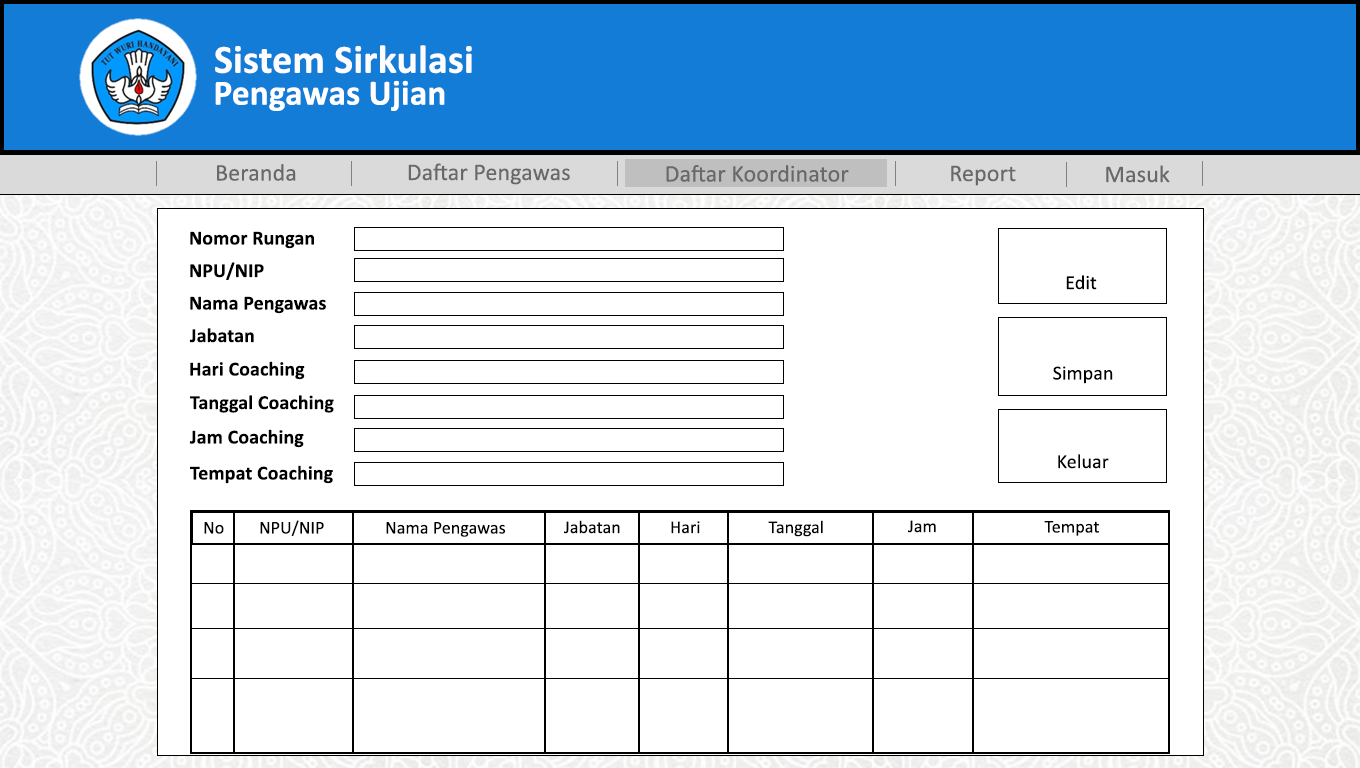
<style>
.page{position:relative;width:1360px;height:768px;background:#ffffff}
.page>*{position:absolute;margin:0}
.t1{font:40.1px "Calibri-Bold";letter-spacing:0.005em;color:#fdfdfd}
.t2{font:35.6px "Calibri-Bold";letter-spacing:0.005em;color:#fffefe}
.t3{font:24px "Calibri";letter-spacing:0.005em;color:#6a6969}
.t4{font:20px "Calibri-Bold";letter-spacing:0.005em;color:#000000}
.t5{font:20px "Calibri";letter-spacing:0.005em;color:#000000}
.t6{font:18px "Calibri";letter-spacing:0.005em;color:#000000}
</style>
<div class="page">
<p class="t1" style="left:215px;top:45px;width:257px;height:29px">Sistem Sirkulasi</p>
<p class="t2" style="left:215px;top:80px;width:230px;height:31px">Pengawas Ujian</p>
<p class="t3" style="left:217px;top:164px;width:79px;height:17px">Beranda</p>
<p class="t3" style="left:408px;top:163px;width:162px;height:22px">Daftar Pengawas</p>
<p class="t3" style="left:666px;top:165px;width:183px;height:17px">Daftar Koordinator</p>
<p class="t3" style="left:951px;top:165px;width:65px;height:21px">Report</p>
<p class="t3" style="left:1106px;top:165px;width:64px;height:18px">Masuk</p>
<p class="t4" style="left:190px;top:231px;width:124px;height:18px">Nomor Rungan</p>
<p class="t4" style="left:190px;top:262px;width:74px;height:18px">NPU/NIP</p>
<p class="t5" style="left:1066px;top:275px;width:31px;height:15px">Edit</p>
<p class="t4" style="left:190px;top:296px;width:136px;height:18px">Nama Pengawas</p>
<p class="t4" style="left:189px;top:328px;width:65px;height:15px">Jabatan</p>
<p class="t4" style="left:190px;top:361px;width:115px;height:19px">Hari Coaching</p>
<p class="t5" style="left:1053px;top:366px;width:60px;height:18px">Simpan</p>
<p class="t4" style="left:190px;top:395px;width:144px;height:18px">Tanggal Coaching</p>
<p class="t4" style="left:189px;top:429px;width:115px;height:19px">Jam Coaching</p>
<p class="t5" style="left:1058px;top:454px;width:51px;height:15px">Keluar</p>
<p class="t4" style="left:190px;top:465px;width:143px;height:19px">Tempat Coaching</p>
<p class="t6" style="left:260px;top:520px;width:64px;height:16px">NPU/NIP</p>
<p class="t6" style="left:564px;top:520px;width:56px;height:14px">Jabatan</p>
<p class="t6" style="left:671px;top:521px;width:29px;height:13px">Hari</p>
<p class="t6" style="left:768px;top:520px;width:55px;height:17px">Tanggal</p>
<p class="t6" style="left:908px;top:520px;width:28px;height:13px">Jam</p>
<p class="t6" style="left:1044px;top:521px;width:55px;height:15px">Tempat</p>
<p class="t6" style="left:204px;top:522px;width:20px;height:12px">No</p>
<p class="t6" style="left:386px;top:522px;width:119px;height:15px">Nama Pengawas</p>
</div>
